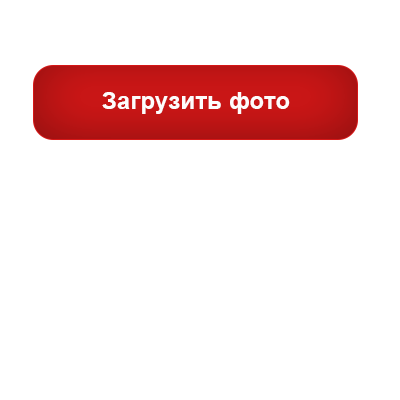
<style>
.page{position:relative;width:400px;height:400px;background:#ffffff}
.page>*{position:absolute;margin:0}
.t1{font:24px "Arial-BoldMT";letter-spacing:0.005em;color:#fefcfc}
</style>
<div class="page">
<p class="t1" style="left:102px;top:92px;width:188px;height:22px">Загрузить фото</p>
</div>
